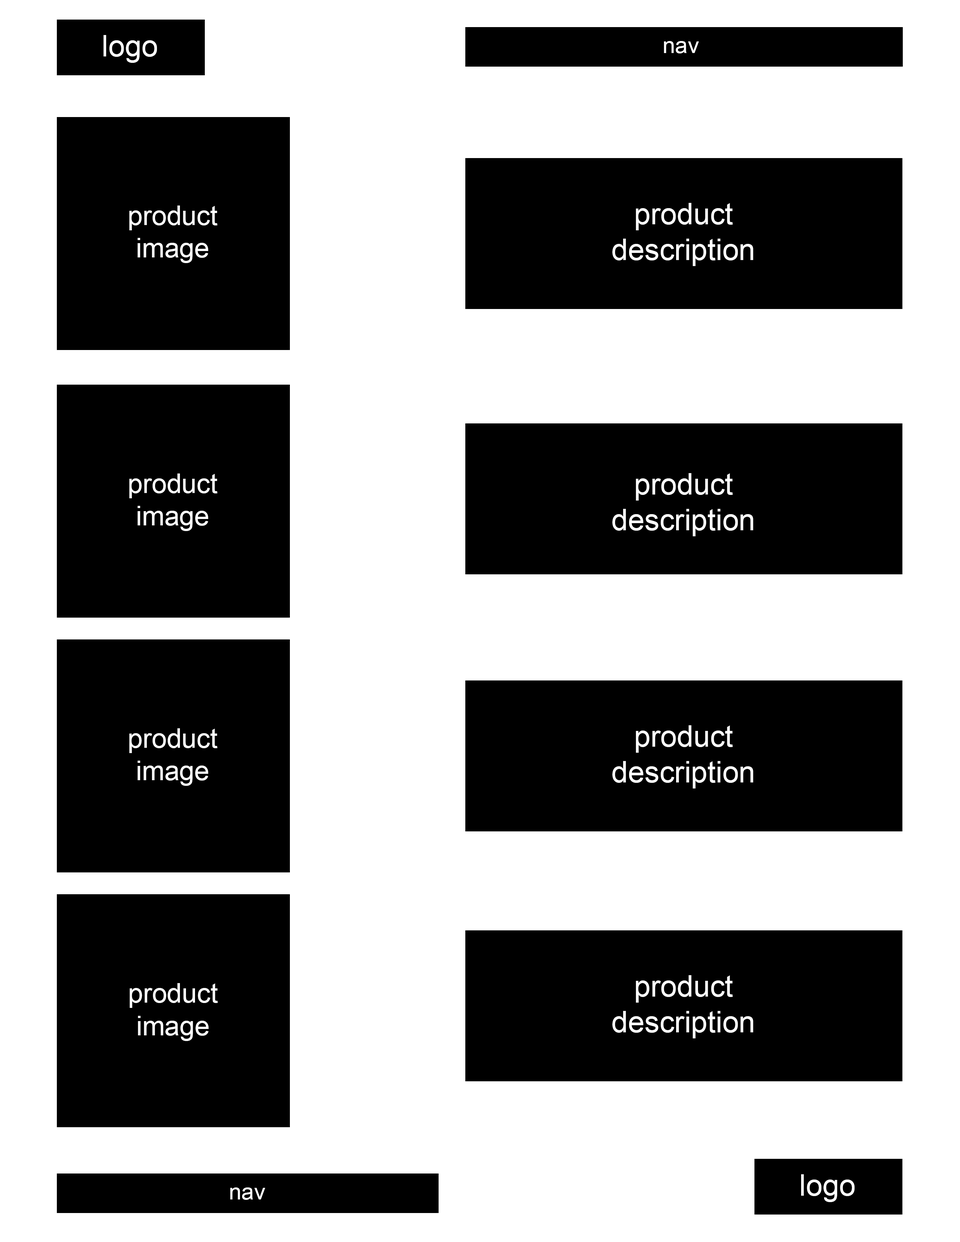
<style>
.page{position:relative;width:960px;height:1242px;background:#ffffff}
.page>*{position:absolute;margin:0}
.t1{font:29.7px "ArialMT";color:#ffffff}
.t2{font:22.5px "ArialMT";color:#ffffff}
.t3{font:27px "ArialMT";color:#ffffff}
</style>
<div class="page">
<p class="t1" style="left:104px;top:35px;width:53px;height:28px">logo</p>
<p class="t1" style="left:104px;top:35px;width:53px;height:28px">logo</p>
<p class="t2" style="left:664px;top:41px;width:35px;height:12px">nav</p>
<p class="t3" style="left:129px;top:206px;width:89px;height:57px;text-align:center">product<br>image</p>
<p class="t1" style="left:612px;top:203px;width:141px;height:63px;text-align:center">product<br>description</p>
<p class="t3" style="left:129px;top:474px;width:89px;height:57px;text-align:center">product<br>image</p>
<p class="t1" style="left:612px;top:473px;width:141px;height:63px;text-align:center">product<br>description</p>
<p class="t1" style="left:612px;top:725px;width:141px;height:64px;text-align:center">product<br>description</p>
<p class="t3" style="left:129px;top:728px;width:89px;height:58px;text-align:center">product<br>image</p>
<p class="t1" style="left:612px;top:975px;width:141px;height:64px;text-align:center">product<br>description</p>
<p class="t3" style="left:129px;top:983px;width:89px;height:58px;text-align:center">product<br>image</p>
<p class="t1" style="left:801px;top:1174px;width:54px;height:28px">logo</p>
<p class="t1" style="left:801px;top:1174px;width:54px;height:28px">logo</p>
<p class="t2" style="left:230px;top:1188px;width:35px;height:12px">nav</p>
<p class="t2" style="left:230px;top:1188px;width:35px;height:12px">nav</p>
</div>
